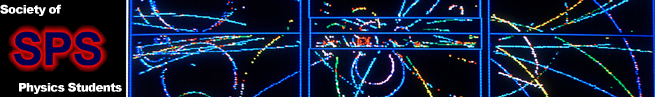
<style>
.page{position:relative;width:655px;height:99px}
.page>*{position:absolute;margin:0}
.t1{font:12px "Arial-Black";letter-spacing:-0.05em;color:#ffffff}
</style>
<div class="page">
<p class="t1" style="left:0px;top:4px;width:62px;height:12px">Society of</p>
<p class="t1" style="left:19px;top:82px;width:103px;height:12px">Physics Students</p>
</div>
